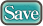
<style>
.page{position:relative;width:43px;height:26px}
.page>*{position:absolute;margin:0}
.t1{font:18px "RyuminPro-ExBold";letter-spacing:-0.08em;color:#ffffff}
</style>
<div class="page">
<p class="t1" style="left:4px;top:5px;width:35px;height:15px">Save</p>
</div>
